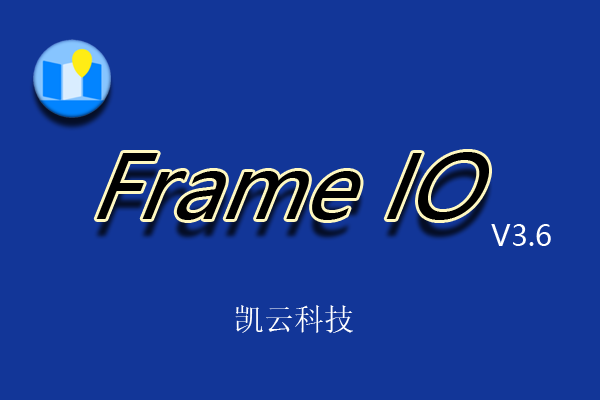
<style>
.page{position:relative;width:600px;height:400px;background:#123698}
.page>*{position:absolute;margin:0}
.t1{font:94px "MicrosoftYaHei";color:#000000;scale:0.94 1}
.t2{font:29.2px "MicrosoftYaHei";color:#ffffff}
.t3{font:30px "NSimSun";color:#ffffff}
</style>
<div class="page">
<p class="t1" style="left:96px;top:152px;width:393px;height:68px">Frame IO</p>
<p class="t2" style="left:491px;top:224px;width:60px;height:22px">V3.6</p>
<p class="t3" style="left:235px;top:305px;width:118px;height:28px">凯云科技</p>
</div>
